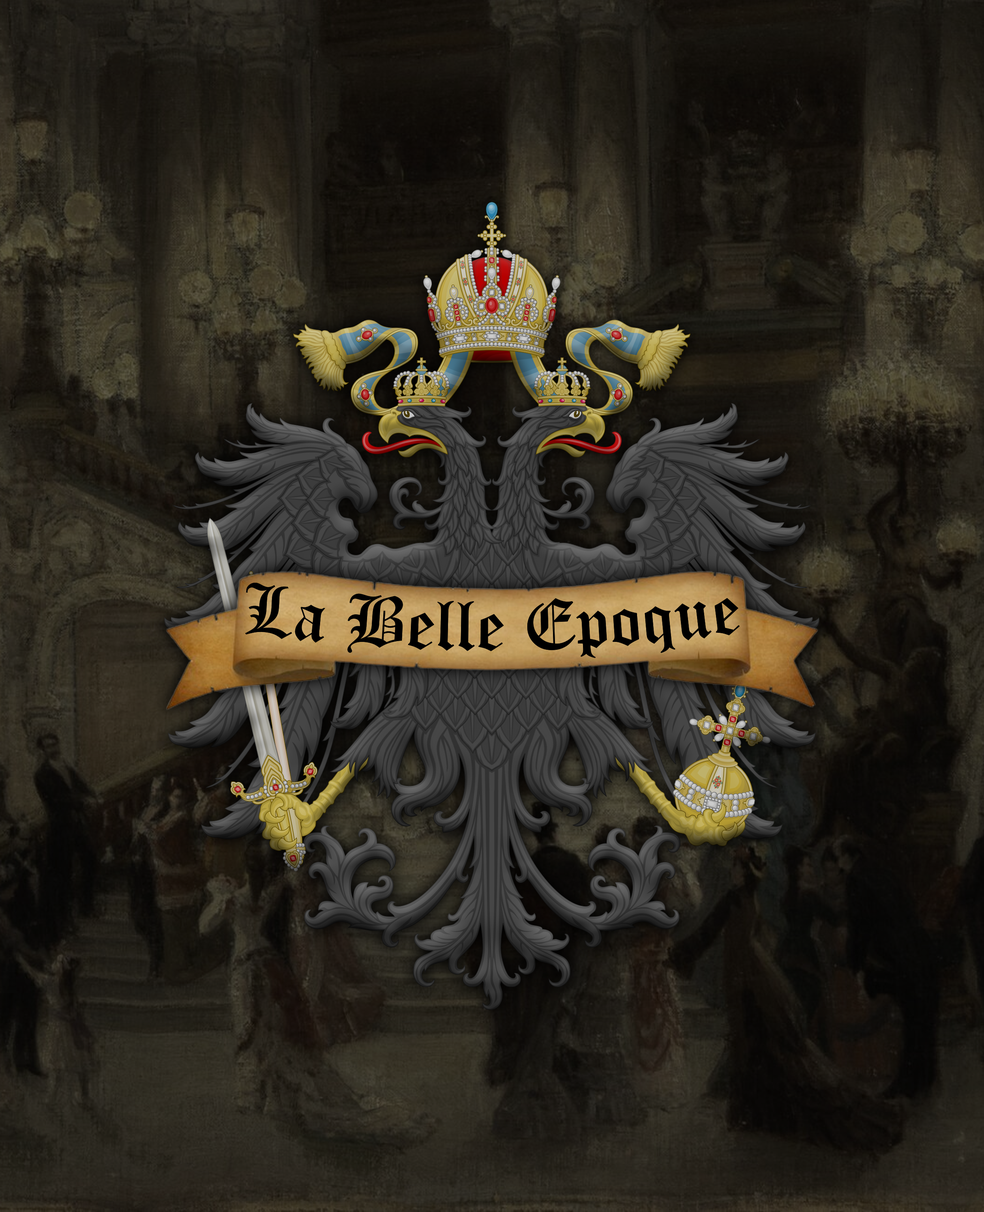
<style>
.page{position:relative;width:984px;height:1212px}
.page>*{position:absolute;margin:0}
.t1{font:71px "OldEnglishTextMT";color:#000000}
</style>
<div class="page">
<p class="t1" style="left:245px;top:583px;width:494px;height:75px">La Belle Epoque</p>
</div>
